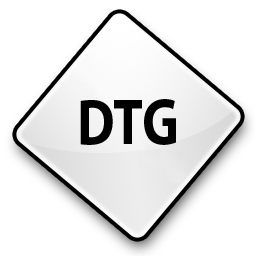
<style>
.page{position:relative;width:256px;height:256px;background:#ffffff}
.page>*{position:absolute;margin:0}
.t1{font:66px "MyriadPro-Bold";letter-spacing:0.005em;color:#010101;scale:0.82 1}
</style>
<div class="page">
<p class="t1" style="left:80px;top:99px;width:96px;height:46px">DTG</p>
</div>
